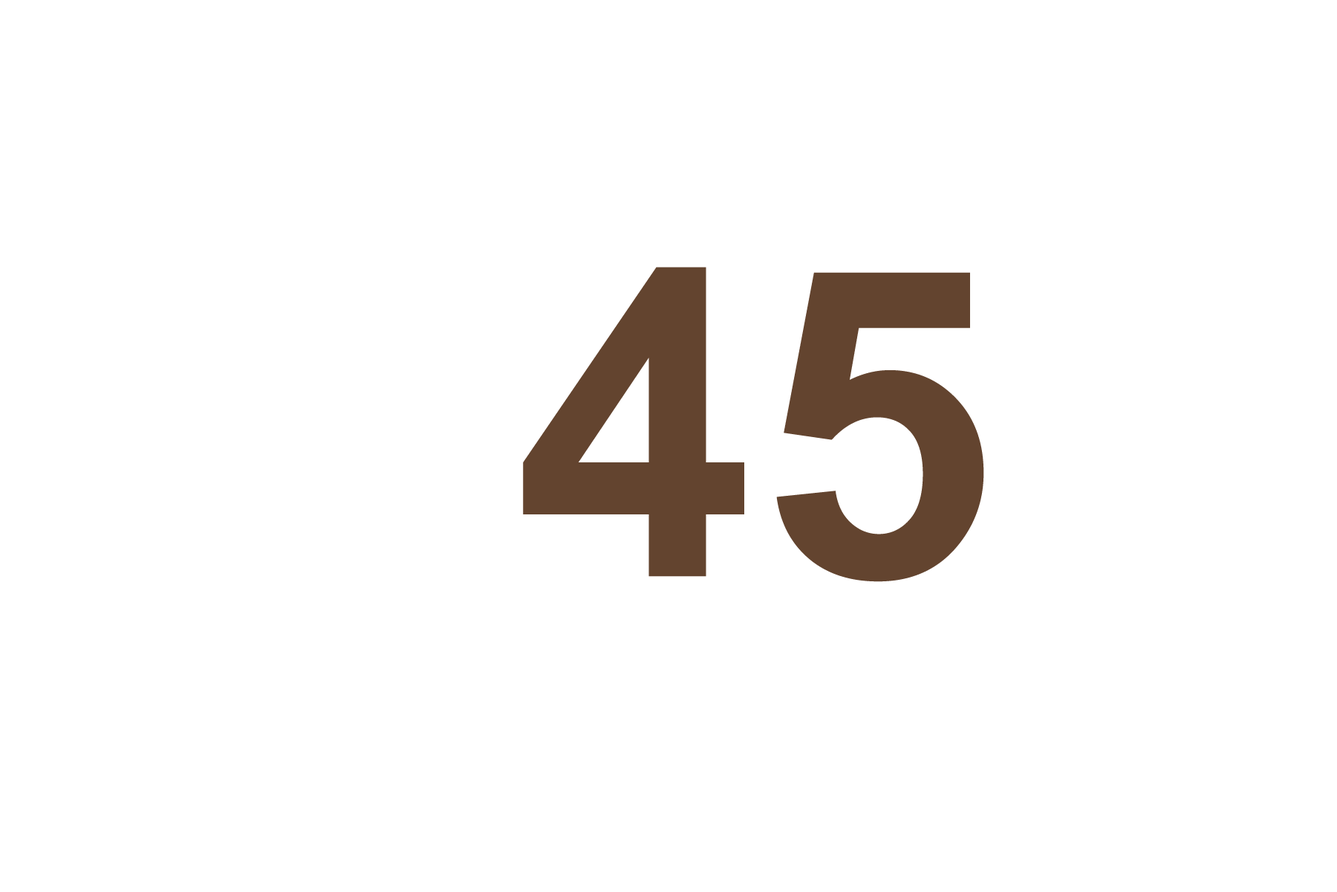
<style>
.page{position:relative;width:1337px;height:892px;background:#ffffff}
.page>*{position:absolute;margin:0}
.t1{font:429.6px "Arial-BoldMT";color:#63442f}
</style>
<div class="page">
<p class="t1" style="left:523px;top:267px;width:461px;height:315px">45</p>
</div>
